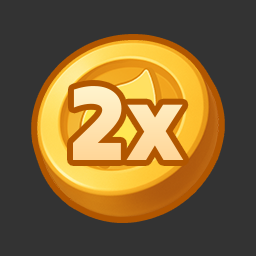
<style>
.page{position:relative;width:256px;height:256px;background:#333333}
.page>*{position:absolute;margin:0}
.t1{font:107.5px "TiltWarp-Regular";color:#ffe1ac}
</style>
<div class="page">
<p class="t1" style="left:73px;top:86px;width:111px;height:74px">2x</p>
</div>
